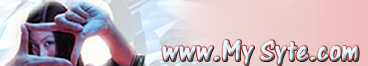
<style>
.page{position:relative;width:368px;height:66px}
.page>*{position:absolute;margin:0}
.t1{font:31px "One Stroke Script LET"}
</style>
<div class="page">
<p class="t1" style="left:161px;top:39px;width:199px;height:27px">www.My Syte.com</p>
</div>
